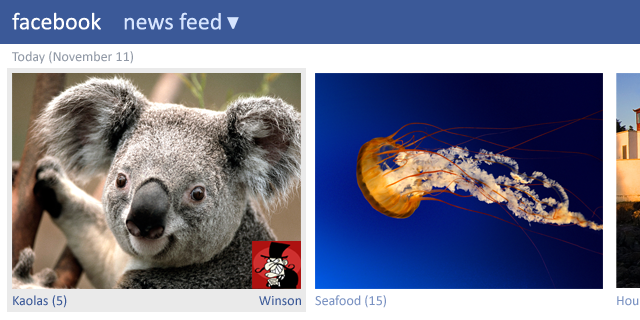
<style>
.page{position:relative;width:640px;height:320px}
.page>*{position:absolute;margin:0}
.t1{font:24px "Calibri";color:#ffffff}
.t2{font:24px "Calibri";color:#d6e5ff}
.t3{font:14px "Calibri";color:#9199a6}
.t4{font:14px "Calibri";color:#3b5998}
.t5{font:14px "Calibri";color:#7a92c2}
</style>
<div class="page">
<p class="t1" style="left:12px;top:12px;width:89px;height:18px">facebook</p>
<p class="t2" style="left:124px;top:12px;width:97px;height:18px">news feed</p>
<p class="t3" style="left:12px;top:51px;width:121px;height:13px">Today (November 11)</p>
<p class="t4" style="left:13px;top:295px;width:54px;height:13px">Kaolas (5)</p>
<p class="t4" style="left:259px;top:296px;width:42px;height:10px">Winson</p>
<p class="t5" style="left:315px;top:295px;width:71px;height:13px">Seafood (15)<br><span class="t4">)</span></p>
</div>
